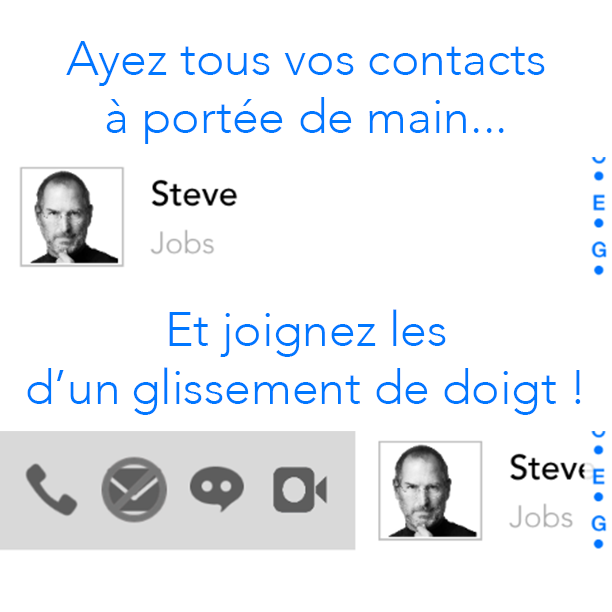
<style>
.page{position:relative;width:612px;height:612px;background:#ffffff}
.page>*{position:absolute;margin:0}
.t1{font:48px "Avenir-Light";color:#0077ff}
</style>
<div class="page">
<p class="t1" style="left:66px;top:41px;width:479px;height:103px;text-align:center">Ayez tous vos contacts<br>à portée de main...</p>
<p class="t1" style="left:27px;top:309px;width:554px;height:106px;text-align:center">Et joignez les<br>d’un glissement de doigt !</p>
</div>
